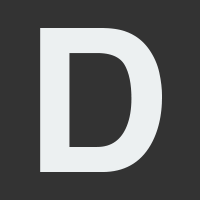
<style>
.page{position:relative;width:200px;height:200px;background:#333333}
.page>*{position:absolute;margin:0}
.t1{font:200px "Helvetica-Bold";letter-spacing:-0.05em;color:#ecf0f1}
</style>
<div class="page">
<p class="t1" style="left:40px;top:28px;width:122px;height:144px">D</p>
</div>
